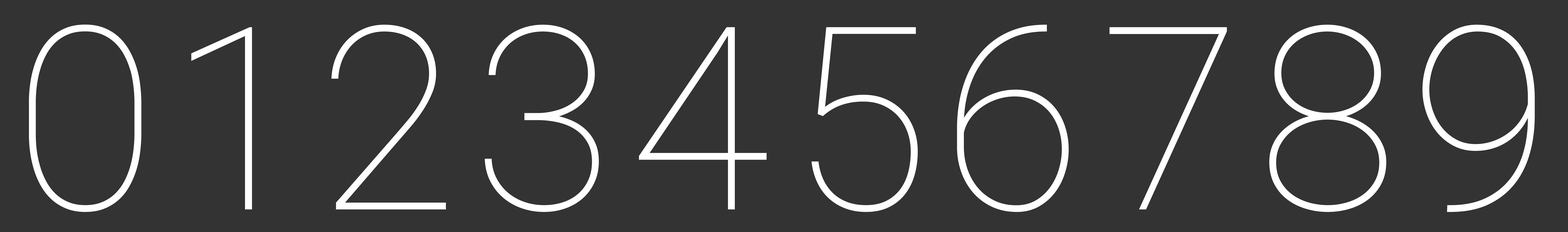
<style>
.page{position:relative;width:1568px;height:232px;background:#333333}
.page>*{position:absolute;margin:0}
.t1{font:256.2px "RobotoMono-Thin";color:#ffffff}
</style>
<div class="page">
<p class="t1" style="left:29px;top:24px;width:1506px;height:188px">0123456789</p>
</div>
